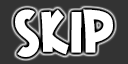
<style>
.page{position:relative;width:128px;height:64px;background:#333333}
.page>*{position:absolute;margin:0}
.t1{font:60px "MailRayStuff";color:#ffffff}
</style>
<div class="page">
<p class="t1" style="left:15px;top:9px;width:98px;height:48px">SKIP</p>
</div>
